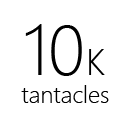
<style>
.page{position:relative;width:130px;height:130px;background:#ffffff}
.page>*{position:absolute;margin:0}
.t1{font:72px "SegoeUI-Light";color:#000000}
.t2{font:36px "SegoeUI-Light";color:#000000}
.t3{font:24px "SegoeUI-Light";color:#000000}
</style>
<div class="page">
<p class="t1" style="left:25px;top:24px;width:80px;height:52px">10<span class="t2">K</span></p>
<p class="t3" style="left:21px;top:85px;width:88px;height:18px">tantacles</p>
</div>
